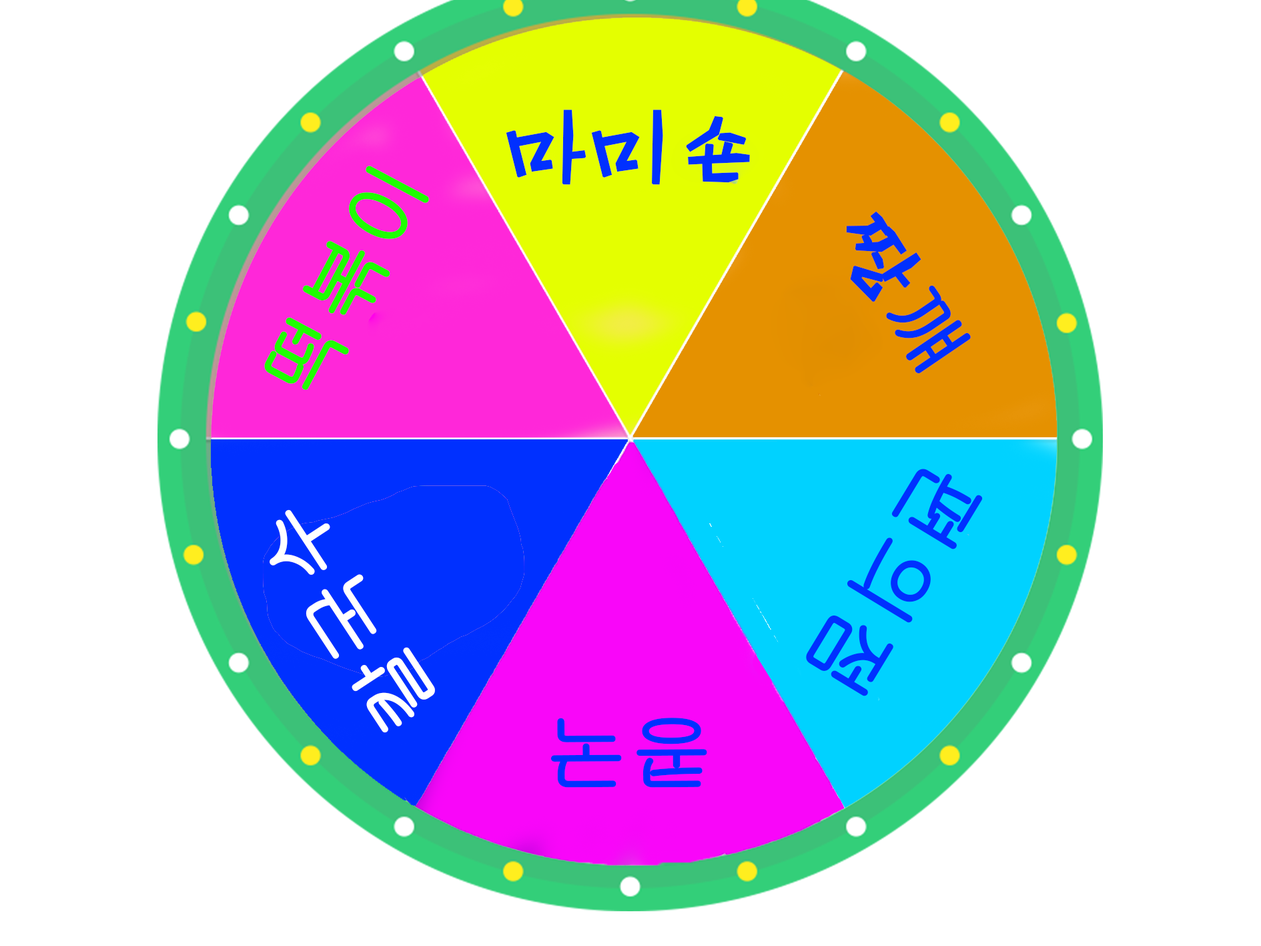
<style>
.page{position:relative;width:1261px;height:946px;background:#ffffff}
.page>*{position:absolute;margin:0}
.t1{font:83.4px "HYsnrL";color:#0030ff;font-weight:bold}
.t2{font:83.4px "Gulim";color:#1eff00;font-weight:bold}
.t3{font:77.3px "HYsnrL";color:#0030ff;font-weight:bold;scale:1.13 1}
.t4{font:77.3px "Gulim";color:#0030ff;font-weight:bold;scale:1.13 1}
.t5{font:88.9px "Gulim";color:#0030ff;font-weight:bold;scale:0.94 1}
.t6{font:83.4px "Gulim";color:#ffffff;font-weight:bold}
.t7{font:83.4px "Gulim";color:#0030ff;font-weight:bold}
</style>
<div class="page">
<p class="t1" style="left:506px;top:109px;width:244px;height:76px">마미숀</p>
<p class="t2" style="left:264px;top:165px;width:165px;height:225px;rotate:-62deg">떡볶이</p>
<p class="t3" style="left:846px;top:211px;width:125px;height:163px;rotate:56deg">짱<span class="t4">꺠</span></p>
<p class="t5" style="left:806px;top:468px;width:177px;height:228px;rotate:121deg">편의점</p>
<p class="t6" style="left:270px;top:509px;width:165px;height:224px;rotate:-123deg">칼국수<span class="t7">수</span></p>
<p class="t7" style="left:550px;top:717px;width:157px;height:70px;rotate:180deg">콩국</p>
</div>
